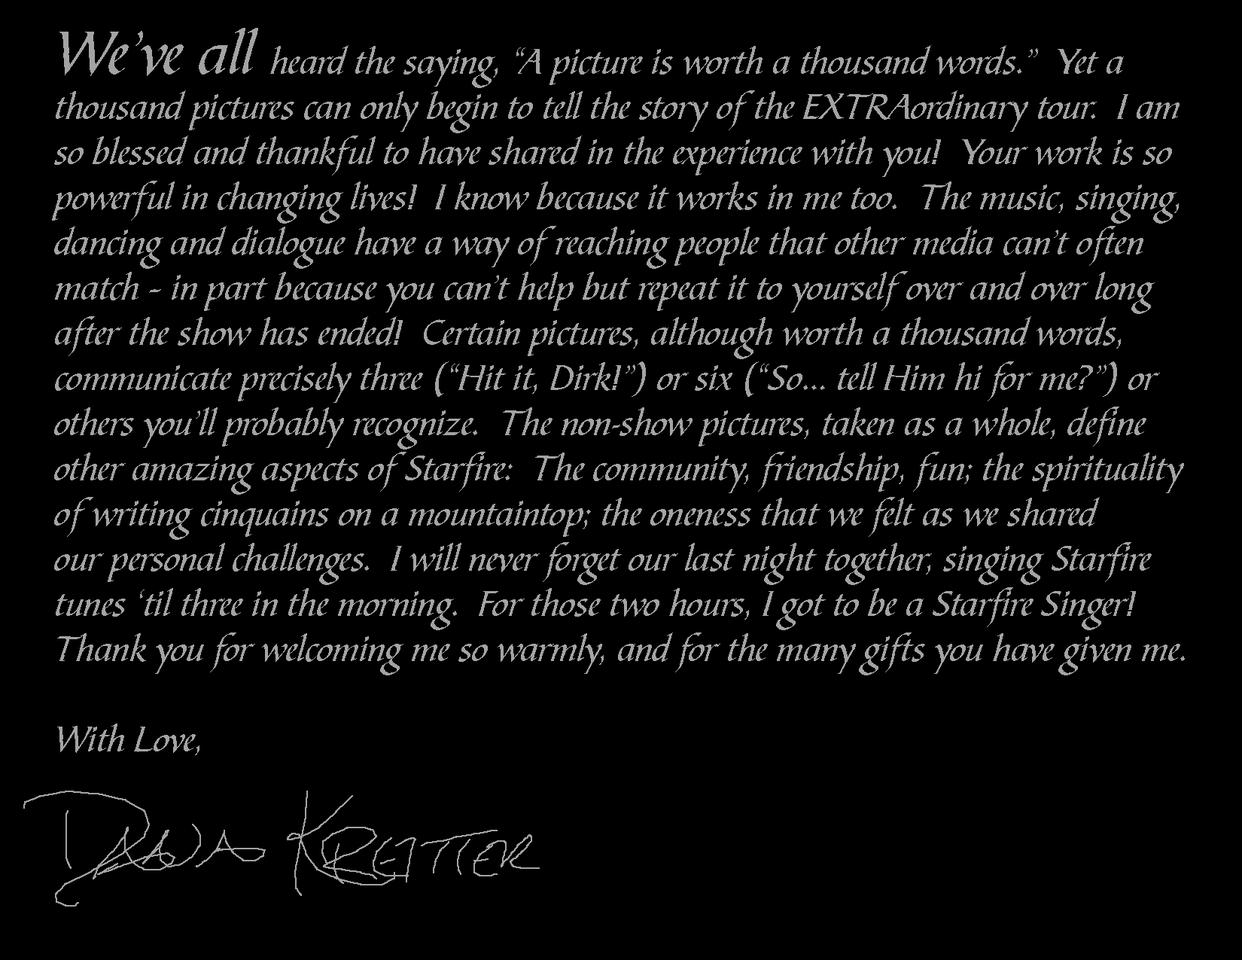
<style>
.page{position:relative;width:1242px;height:960px;background:#000000}
.page>*{position:absolute;margin:0}
.t1{font:37.6px "BibleScrT";color:#a3a3a3}
.t2{font:62.7px "BibleScrT";color:#a3a3a3}
</style>
<div class="page">
<p class="t1" style="left:52px;top:28px;width:1133px;height:727px"><span class="t2">We’ve all </span>heard the saying, “A picture is worth a thousand words.”  Yet a <br>thousand pictures can only begin to tell the story of the EXTRAordinary tour.  I am <br>so blessed and thankful to have shared in the experience with you!  Your work is so <br>powerful in changing lives!  I know because it works in me too.  The music, singing, <br>dancing and dialogue have a way of reaching people that other media can’t often <br>match – in part because you can’t help but repeat it to yourself over and over long <br>after the show has ended!  Certain pictures, although worth a thousand words, <br>communicate precisely three (“Hit it, Dirk!”) or six (“So… tell Him hi for me?”) or <br>others you’ll probably recognize.  The non-show pictures, taken as a whole, define <br>other amazing aspects of Starfire:  The community, friendship, fun; the spirituality <br>of writing cinquains on a mountaintop; the oneness that we felt as we shared <br>our personal challenges.  I will never forget our last night together, singing Starfire <br>tunes ‘til three in the morning.  For those two hours, I got to be a Starfire Singer!  <br>Thank you for welcoming me so warmly, and for the many gifts you have given me.<br><br>With Love,</p>
</div>
